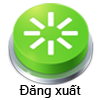
<style>
.page{position:relative;width:100px;height:100px;background:#ffffff}
.page>*{position:absolute;margin:0}
.t1{font:13.3px "MicrosoftSansSerif";color:#000000}
</style>
<div class="page">
<p class="t1" style="left:19px;top:85px;width:62px;height:13px">Đăng xuất</p>
</div>
